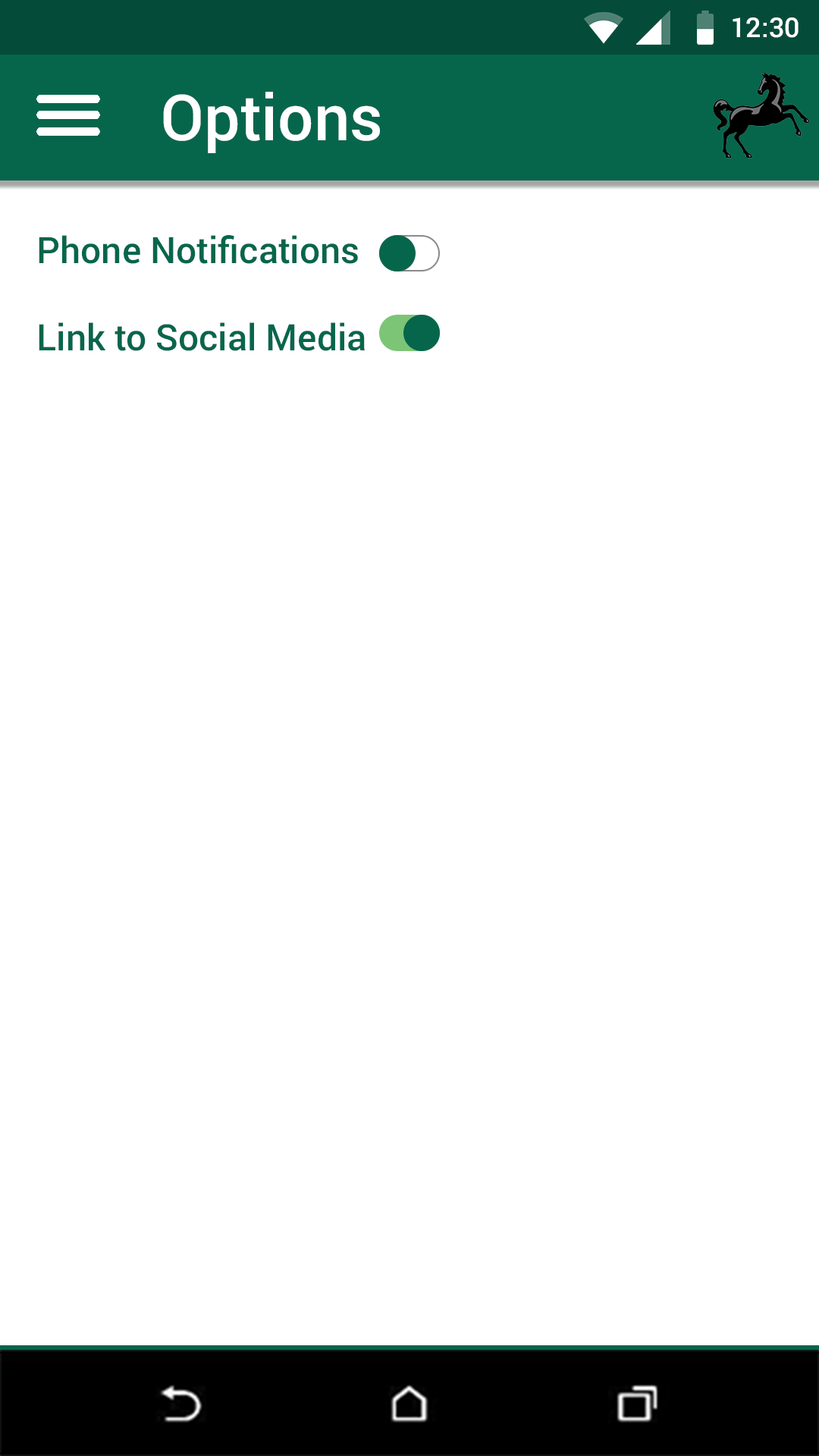
<style>
.page{position:relative;width:819px;height:1456px;background:#ffffff}
.page>*{position:absolute;margin:0}
.t1{font:27.3px "Roboto-Medium";color:#ffffff}
.t2{font:63.7px "Roboto-Medium";color:#ffffff}
.t3{font:36.4px "Roboto-Medium";color:#06664c}
</style>
<div class="page">
<p class="t1" style="left:733px;top:17px;width:66px;height:21px">12:30</p>
<p class="t2" style="left:163px;top:92px;width:217px;height:61px">Options</p>
<p class="t3" style="left:39px;top:235px;width:326px;height:116px">Phone Notifications<br><br>Link to Social Media</p>
</div>
